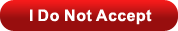
<style>
.page{position:relative;width:178px;height:31px;background:#980e0e}
.page>*{position:absolute;margin:0}
.t1{font:16px "Arial-BoldMT";letter-spacing:0.014em;color:#ffffff}
</style>
<div class="page">
<p class="t1" style="left:30px;top:9px;width:122px;height:16px">I Do Not Accept</p>
</div>
